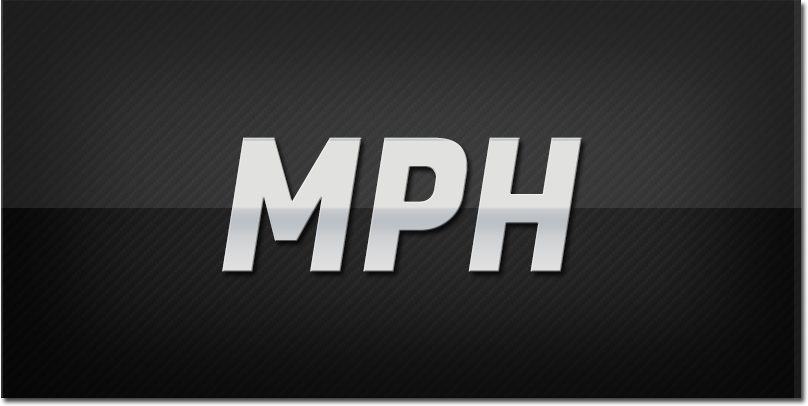
<style>
.page{position:relative;width:808px;height:406px}
.page>*{position:absolute;margin:0}
.t1{font:185.2px "FugazOne-Regular";color:#dfdfdf;scale:0.89 1}
</style>
<div class="page">
<p class="t1" style="left:222px;top:137px;width:360px;height:135px">MPH</p>
</div>
